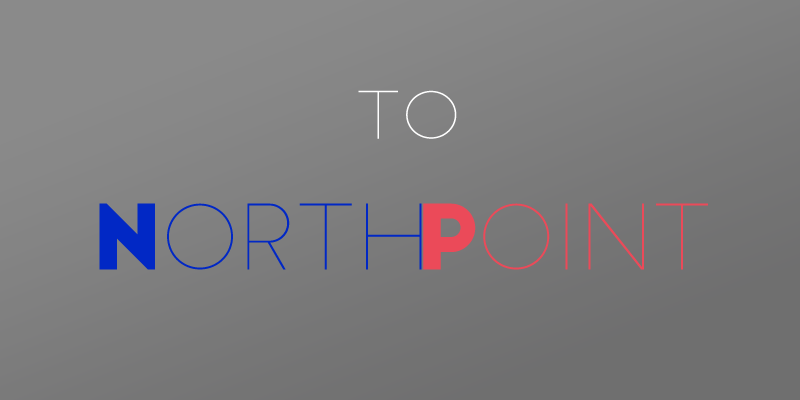
<style>
.page{position:relative;width:800px;height:400px}
.page>*{position:absolute;margin:0}
.t1{font:109px "SlimJoe";letter-spacing:0.005em;color:#ffffff;scale:1.05 1}
.t2{font:150px "SlimJoe";letter-spacing:0.005em;color:#0128c5}
.t3{font:150px "BigJohn";letter-spacing:0.005em;color:#0128c5}
.t4{font:150px "SlimJoe";letter-spacing:0.005em;color:#eb4a59}
.t5{font:150px "BigJohn";letter-spacing:0.005em;color:#eb4a59}
</style>
<div class="page">
<p class="t1" style="left:358px;top:90px;width:99px;height:49px">to</p>
<p class="t2" style="left:99px;top:203px;width:323px;height:67px"><span class="t3">N</span>orth</p>
<p class="t4" style="left:423px;top:203px;width:285px;height:67px"><span class="t5">P</span>oint</p>
</div>
